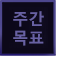
<style>
.page{position:relative;width:64px;height:64px;background:#0c0819}
.page>*{position:absolute;margin:0}
.t1{font:16px "MalgunGothicBold";color:#6861a3}
</style>
<div class="page">
<p class="t1" style="left:13px;top:11px;width:31px;height:35px">주간<br>목표</p>
</div>
